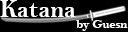
<style>
.page{position:relative;width:128px;height:32px;background:#000000}
.page>*{position:absolute;margin:0}
.t1{font:25px "BellMTBold";color:#ffffff}
.t2{font:12.5px "BellMTBold";color:#ffffff}
</style>
<div class="page">
<p class="t1" style="left:0px;top:0px;width:76px;height:17px">Katana</p>
<p class="t2" style="left:76px;top:20px;width:52px;height:11px">by Guesn</p>
</div>
